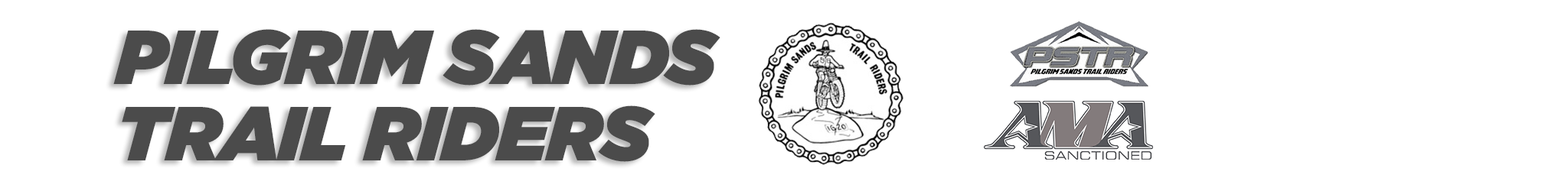
<style>
.page{position:relative;width:1568px;height:194px;background:#ffffff}
.page>*{position:absolute;margin:0}
.t1{font:76.6px/76.6px "Gotham-UltraItalic";letter-spacing:-0.016em;color:#4b4b4b}
</style>
<div class="page">
<p class="t1" style="left:113px;top:29px;width:607px;height:133px">PILGRIM SANDS<br>TRAIL RIDERS</p>
</div>
